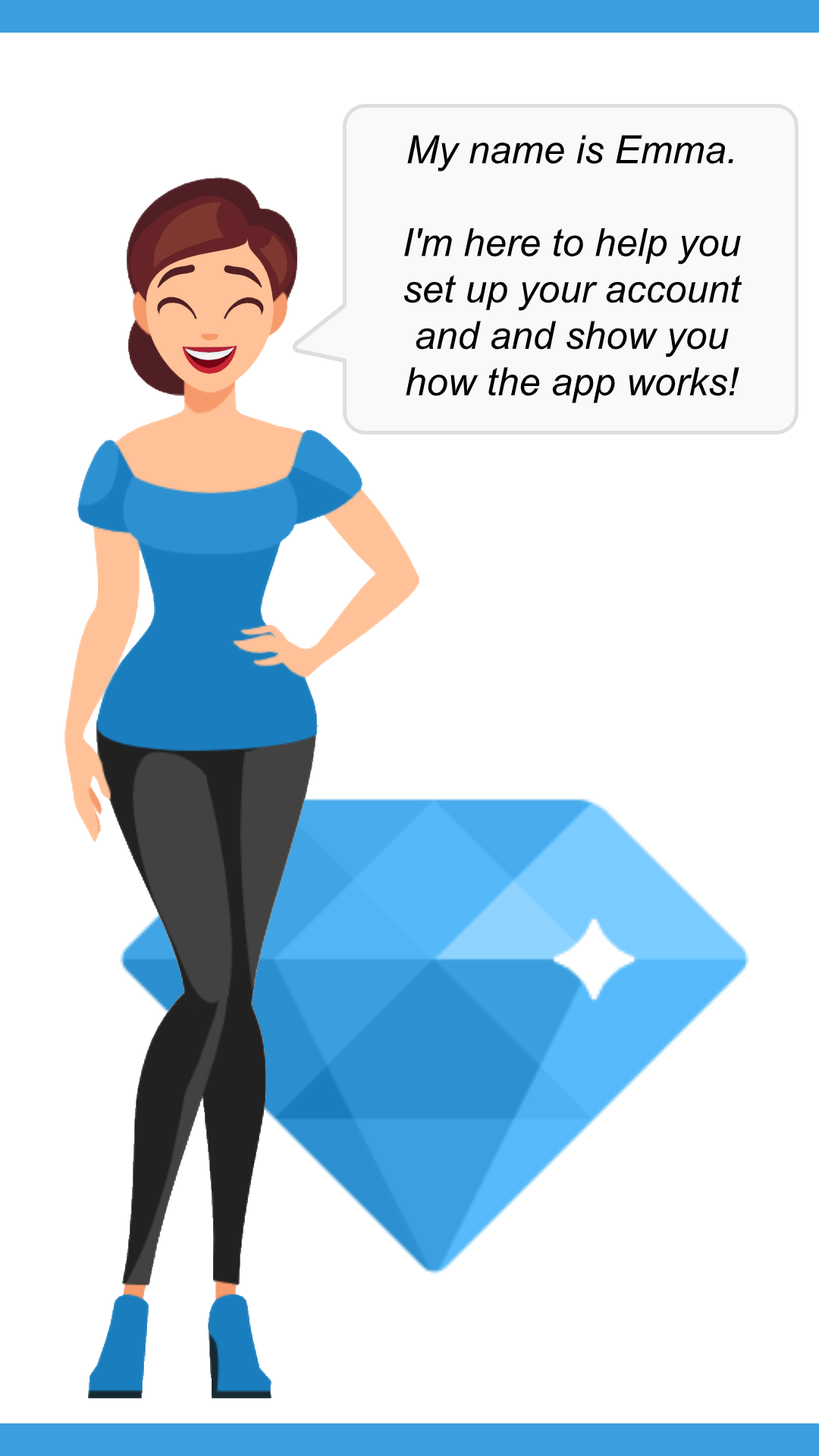
<style>
.page{position:relative;width:819px;height:1456px;background:#ffffff}
.page>*{position:absolute;margin:0}
.t1{font:38.7px "Arial-ItalicMT";color:#000000}
</style>
<div class="page">
<p class="t1" style="left:403px;top:135px;width:339px;height:268px;text-align:center">My name is Emma.<br><br>I'm here to help you set up your account and and show you how the app works!</p>
</div>
